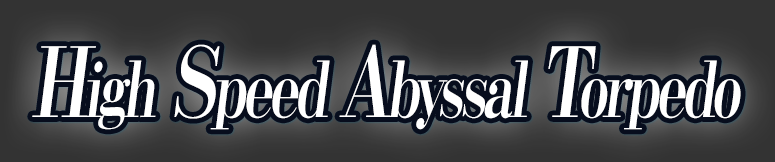
<style>
.page{position:relative;width:775px;height:162px;background:#333333}
.page>*{position:absolute;margin:0}
.t1{font:76.8px "KochoStd-Heavy";letter-spacing:-0.08em;color:#ffffff;font-style:italic;scale:0.72 1}
.t2{font:96px "KochoStd-Heavy";letter-spacing:-0.08em;color:#ffffff;font-style:italic;scale:0.72 1}
</style>
<div class="page">
<p class="t1" style="left:32px;top:44px;width:709px;height:86px"><span class="t2">H</span>igh<span class="t2"> S</span>peed <span class="t2">A</span>byssal<span class="t2"> T</span>orpedo</p>
</div>
